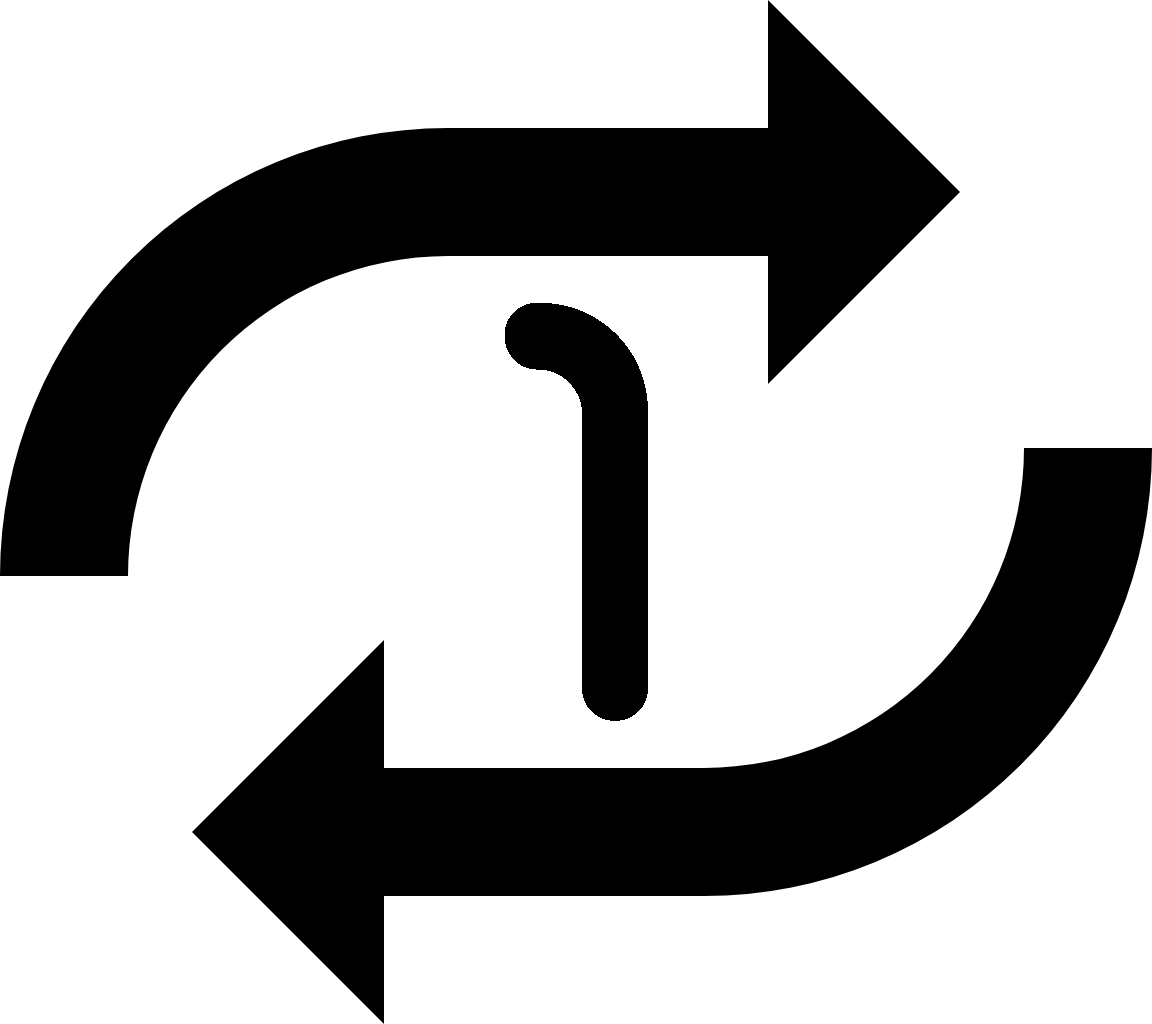
<style>
.page{position:relative;width:1152px;height:1024px;background:#ffffff}
.page>*{position:absolute;margin:0}
.t1{font:900px "REEJI-Cappuccino-boldGB1.0";color:#000000}
</style>
<div class="page">
<p class="t1" style="left:505px;top:303px;width:143px;height:418px">1</p>
</div>
